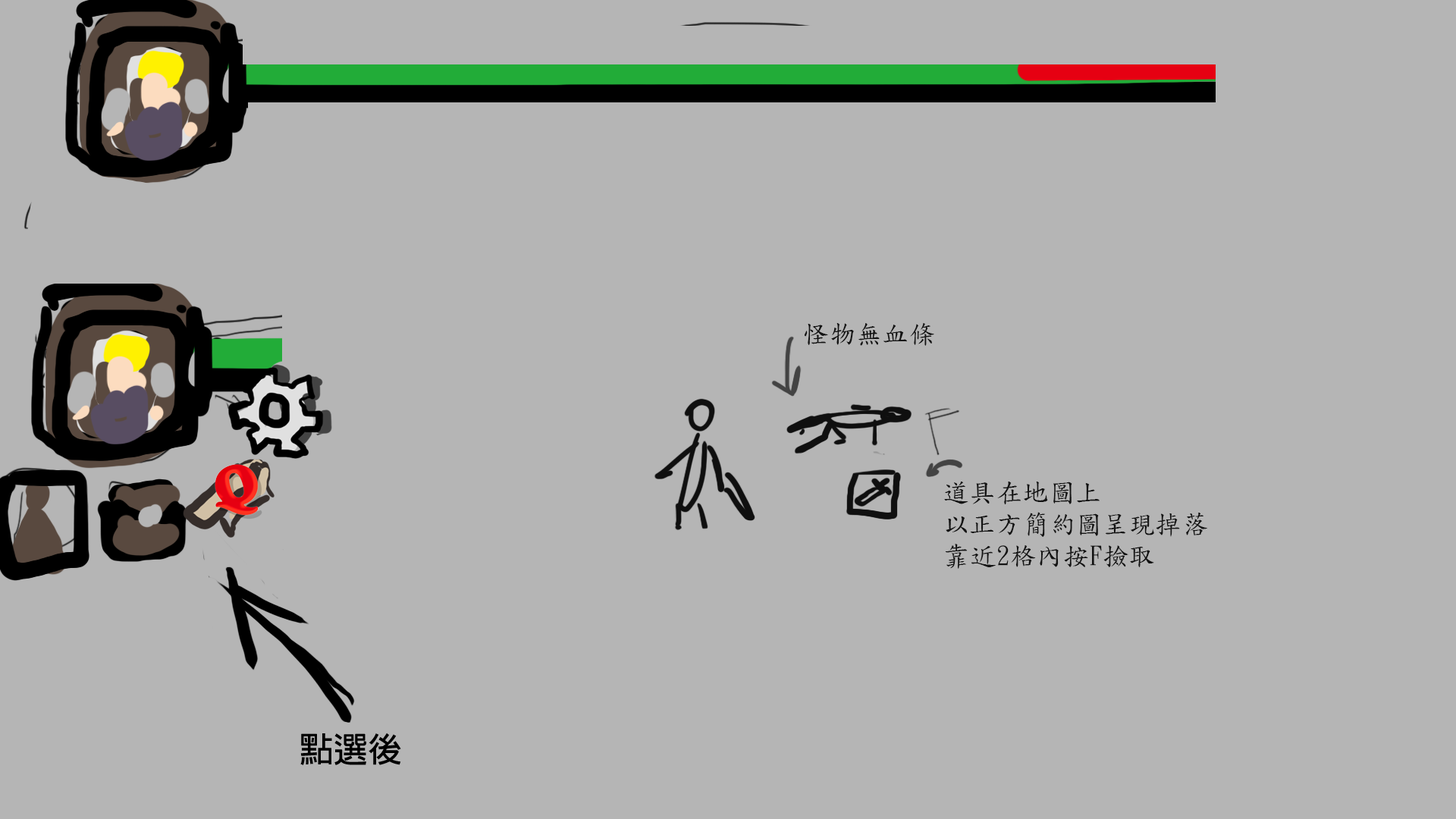
<style>
.page{position:relative;width:1456px;height:819px;background:#b5b5b5}
.page>*{position:absolute;margin:0}
.t1{font:26.5px "DFKaiShu-SB-Estd-BF";color:#131313}
</style>
<div class="page">
<p class="t1" style="left:805px;top:323px;width:129px;height:23px">怪物無血條</p>
<p class="t1" style="left:944px;top:482px;width:263px;height:87px">道具在地圖上<br>以正方簡約圖呈現掉落<br>靠近2格內按F撿取</p>
</div>
